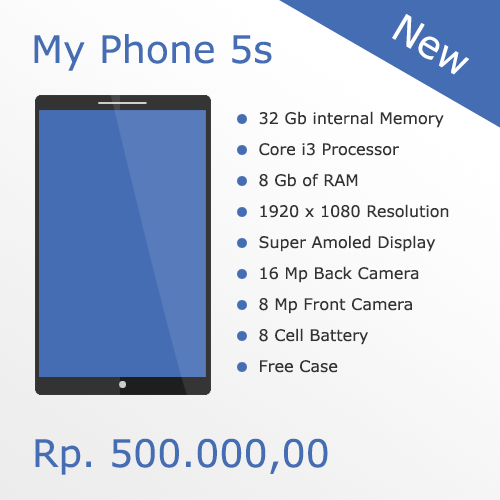
<style>
.page{position:relative;width:500px;height:500px}
.page>*{position:absolute;margin:0}
.t1{font:38px "Verdana";color:#ffffff}
.t2{font:38px "Verdana";color:#456db3}
.t3{font:16px "Verdana";color:#333333}
</style>
<div class="page">
<p class="t1" style="left:392px;top:14px;width:77px;height:61px;rotate:31deg">New</p>
<p class="t2" style="left:34px;top:34px;width:238px;height:37px">My Phone 5s</p>
<p class="t3" style="left:259px;top:111px;width:185px;height:17px">32 Gb internal Memory</p>
<p class="t3" style="left:259px;top:143px;width:140px;height:13px">Core i3 Processor</p>
<p class="t3" style="left:259px;top:173px;width:99px;height:14px">8 Gb of RAM</p>
<p class="t3" style="left:260px;top:204px;width:189px;height:14px">1920 x 1080 Resolution</p>
<p class="t3" style="left:259px;top:235px;width:177px;height:17px">Super Amoled Display</p>
<p class="t3" style="left:260px;top:266px;width:159px;height:17px">16 Mp Back Camera</p>
<p class="t3" style="left:259px;top:298px;width:153px;height:16px">8 Mp Front Camera</p>
<p class="t3" style="left:259px;top:328px;width:109px;height:17px">8 Cell Battery</p>
<p class="t3" style="left:260px;top:360px;width:78px;height:13px">Free Case</p>
<p class="t2" style="left:35px;top:438px;width:293px;height:37px">Rp. 500.000,00</p>
</div>
